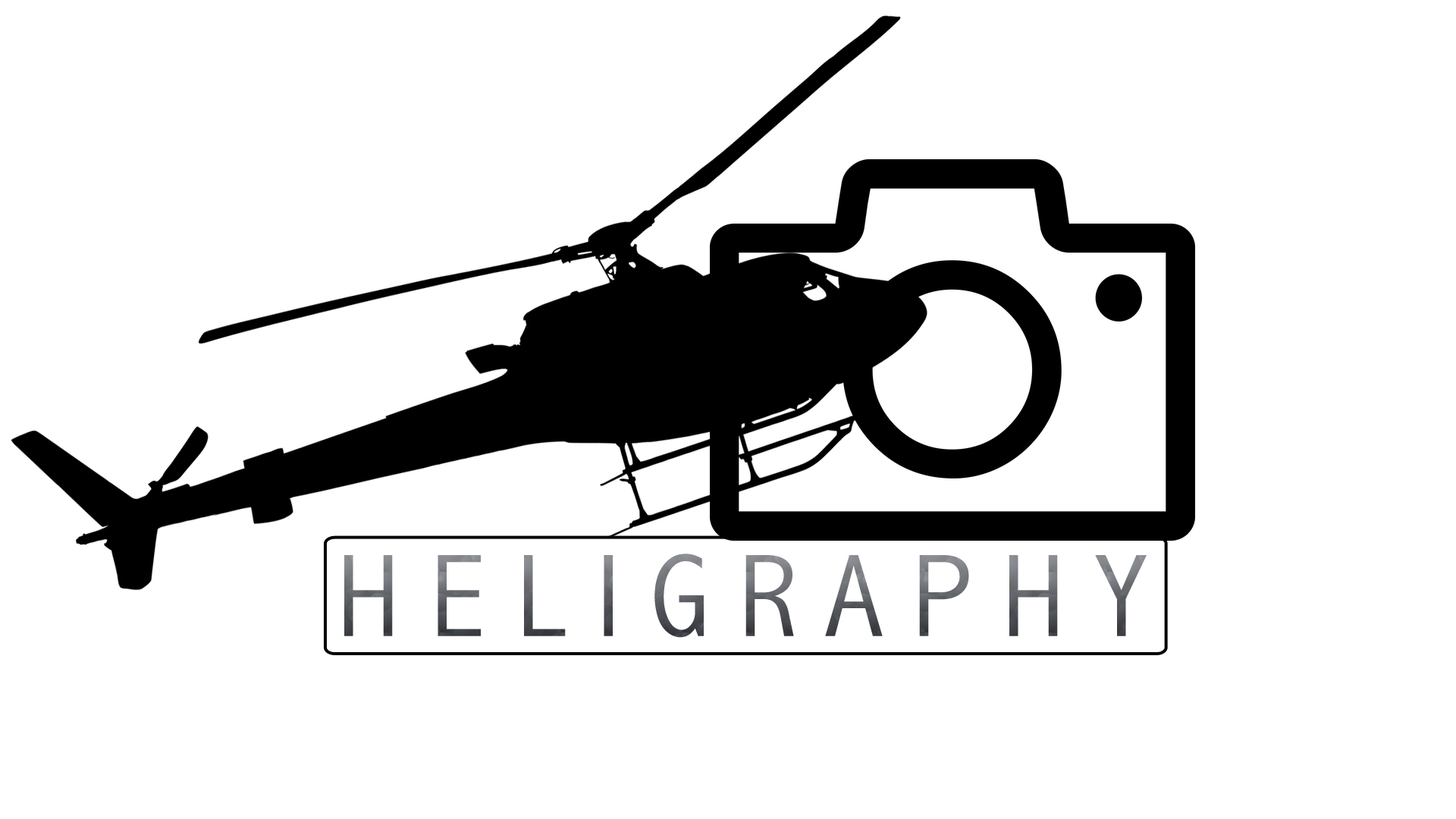
<style>
.page{position:relative;width:1456px;height:819px;background:#ffffff}
.page>*{position:absolute;margin:0}
.t1{font:118.5px "AbadiMT-CondensedLight";text-transform:uppercase;scale:1.08 1}
</style>
<div class="page">
<p class="t1" style="left:344px;top:554px;width:803px;height:84px">H e l i g r a p h y</p>
</div>
